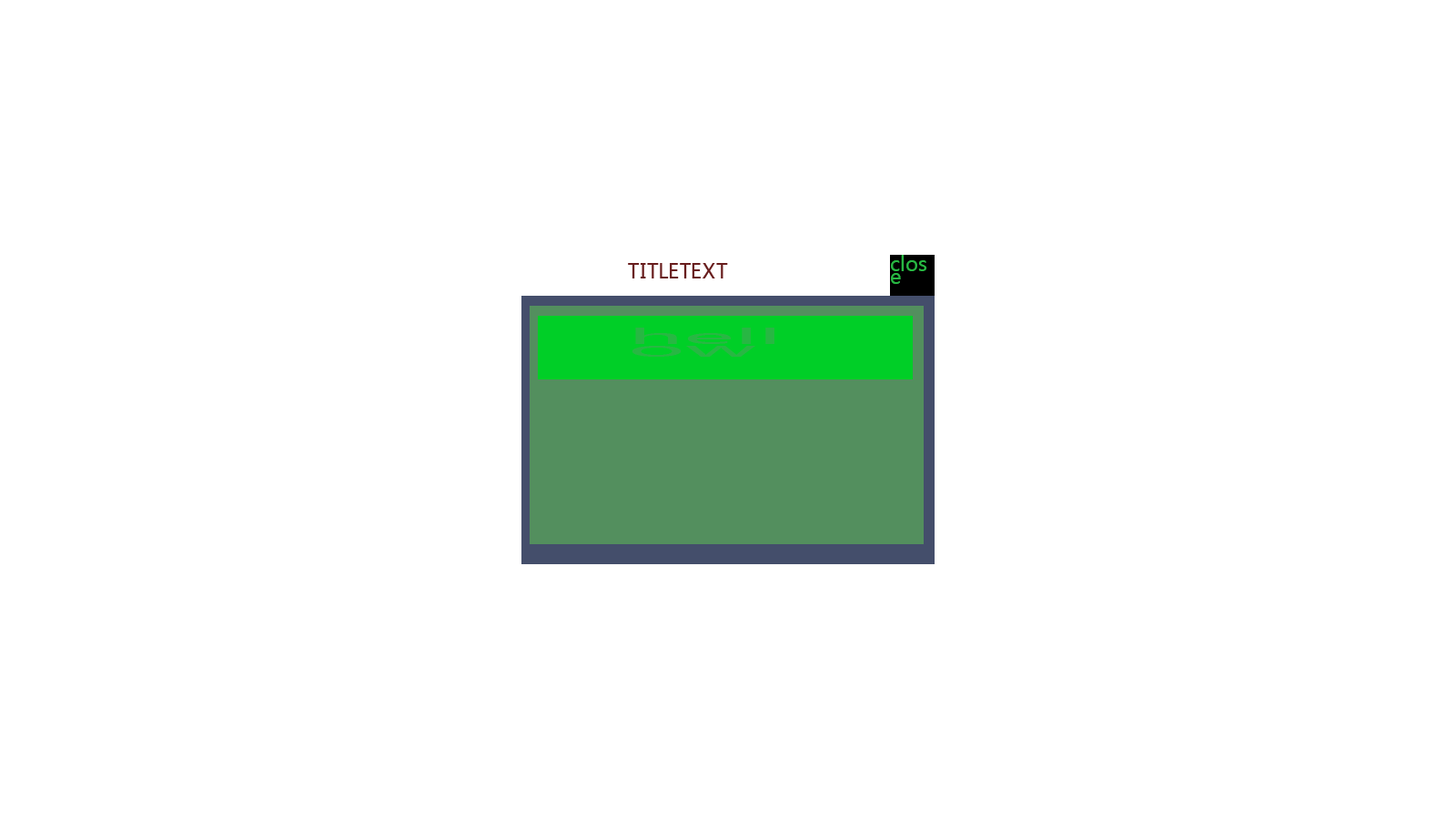
<style>
.page{position:relative;width:1456px;height:819px;background:#ffffff}
.page>*{position:absolute;margin:0}
.t1{font:20px "MicrosoftYaHei";color:#28b743}
.t2{font:20px "MicrosoftYaHei";letter-spacing:0.05em;color:#681d1d;text-transform:uppercase}
.t3{font:20px "MicrosoftYaHei";color:#28b743;scale:4.49 1}
</style>
<div class="page">
<p class="t1" style="left:891px;top:255px;width:36px;height:29px">close</p>
<p class="t1" style="left:891px;top:255px;width:36px;height:29px">close</p>
<p class="t2" style="left:628px;top:263px;width:100px;height:15px">titleText</p>
<p class="t3" style="left:632px;top:328px;width:142px;height:29px">hellow item</p>
</div>
